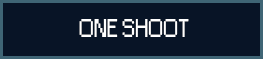
<style>
.page{position:relative;width:263px;height:59px;background:#081426}
.page>*{position:absolute;margin:0}
.t1{font:24px "Small Fonts";color:#ffffff}
</style>
<div class="page">
<p class="t1" style="left:79px;top:19px;width:110px;height:18px">ONE SHOOT</p>
</div>
